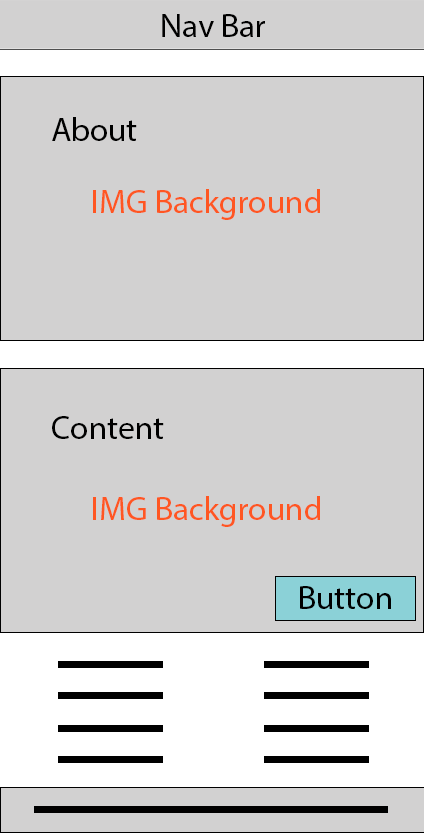
<style>
.page{position:relative;width:424px;height:833px;background:#d2d1d1}
.page>*{position:absolute;margin:0}
.t1{font:33.3px "MyriadPro-Regular";color:#000000}
.t2{font:33.3px "MyriadPro-Regular";color:#ff5622}
</style>
<div class="page">
<p class="t1" style="left:162px;top:14px;width:103px;height:23px">Nav Bar</p>
<p class="t1" style="left:52px;top:117px;width:85px;height:24px">About</p>
<p class="t2" style="left:93px;top:189px;width:227px;height:31px">IMG Background</p>
<p class="t1" style="left:52px;top:416px;width:112px;height:23px">Content</p>
<p class="t2" style="left:93px;top:496px;width:227px;height:31px">IMG Background</p>
<p class="t1" style="left:300px;top:586px;width:91px;height:23px">Button</p>
</div>
